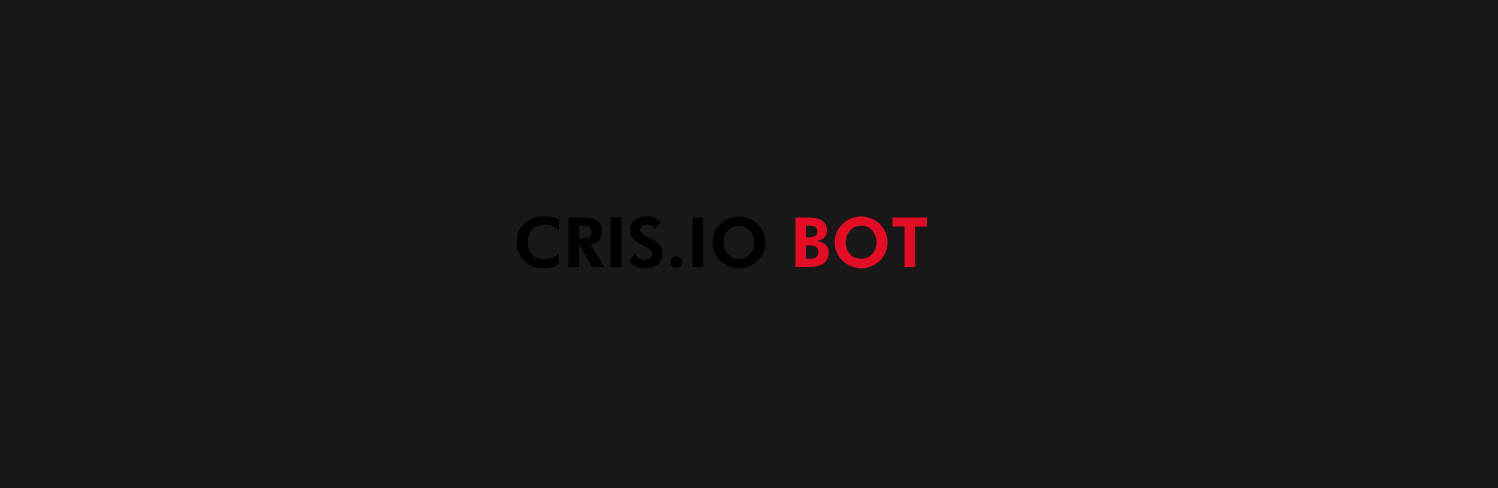
<style>
.page{position:relative;width:1498px;height:488px;background:#181818}
.page>*{position:absolute;margin:0}
.t1{font:69.2px "FuturaBT-Heavy";text-transform:uppercase}
</style>
<div class="page">
<p class="t1" style="left:516px;top:216px;width:411px;height:53px">cris.io bot</p>
</div>
